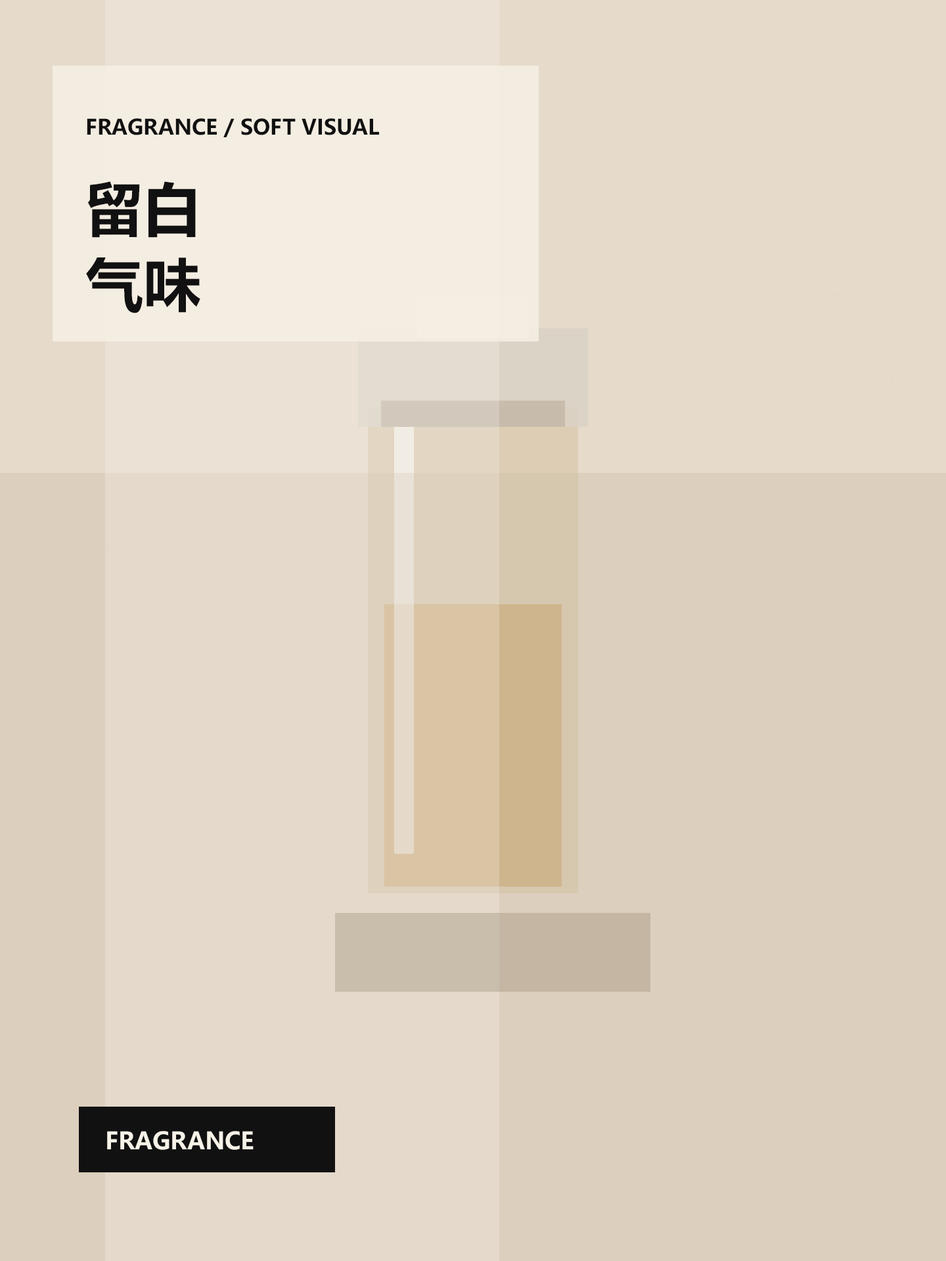
<style>
.page{position:relative;width:946px;height:1261px;background:#ddcfbe}
.page>*{position:absolute;margin:0}
.t1{font:21px "MicrosoftYaHeiUI-Bold";color:#111111}
.t2{font:57.8px "MicrosoftYaHeiUI-Bold";color:#111111}
.t3{font:23.6px "MicrosoftYaHeiUI-Bold";color:#f7f2e8}
</style>
<div class="page">
<p class="t1" style="left:87px;top:118px;width:292px;height:19px">FRAGRANCE / SOFT VISUAL</p>
<p class="t2" style="left:87px;top:181px;width:109px;height:57px">留白</p>
<p class="t2" style="left:86px;top:257px;width:114px;height:56px">气味</p>
<p class="t3" style="left:107px;top:1131px;width:146px;height:19px">FRAGRANCE</p>
</div>
